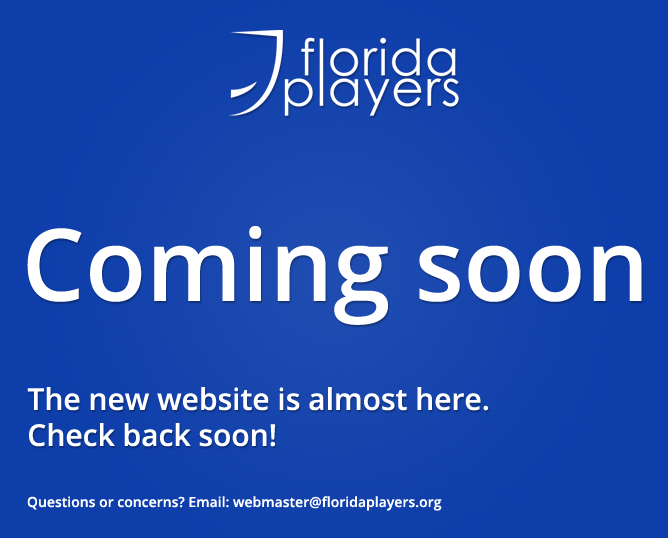
<style>
.page{position:relative;width:668px;height:538px;background:#0e3eaa}
.page>*{position:absolute;margin:0}
.t1{font:100px "OpenSans-Semibold";color:#ffffff}
.t2{font:30px "OpenSans-Semibold";color:#ffffff}
.t3{font:14px "OpenSans-Semibold";color:#ffffff}
</style>
<div class="page">
<p class="t1" style="left:27px;top:226px;width:615px;height:99px">Coming soon</p>
<p class="t2" style="left:27px;top:387px;width:462px;height:60px">The new website is almost here. <br>Check back soon!</p>
<p class="t3" style="left:27px;top:496px;width:415px;height:15px">Questions or concerns? Email: webmaster@floridaplayers.org</p>
</div>
